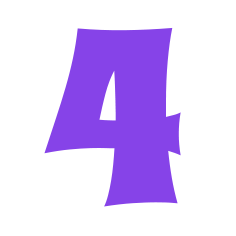
<style>
.page{position:relative;width:236px;height:236px;background:#ffffff}
.page>*{position:absolute;margin:0}
.t1{font:250px "SpicyRice-Regular";color:#8643e8}
</style>
<div class="page">
<p class="t1" style="left:44px;top:27px;width:137px;height:180px">4</p>
</div>
